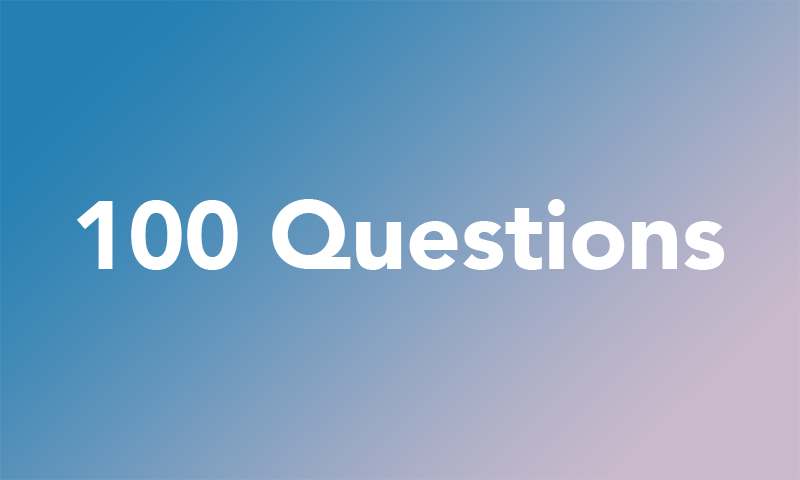
<style>
.page{position:relative;width:800px;height:480px}
.page>*{position:absolute;margin:0}
.t1{font:95.6px "Avenir-Black";color:#ffffff}
</style>
<div class="page">
<p class="t1" style="left:76px;top:199px;width:649px;height:71px">100 Questions</p>
</div>
